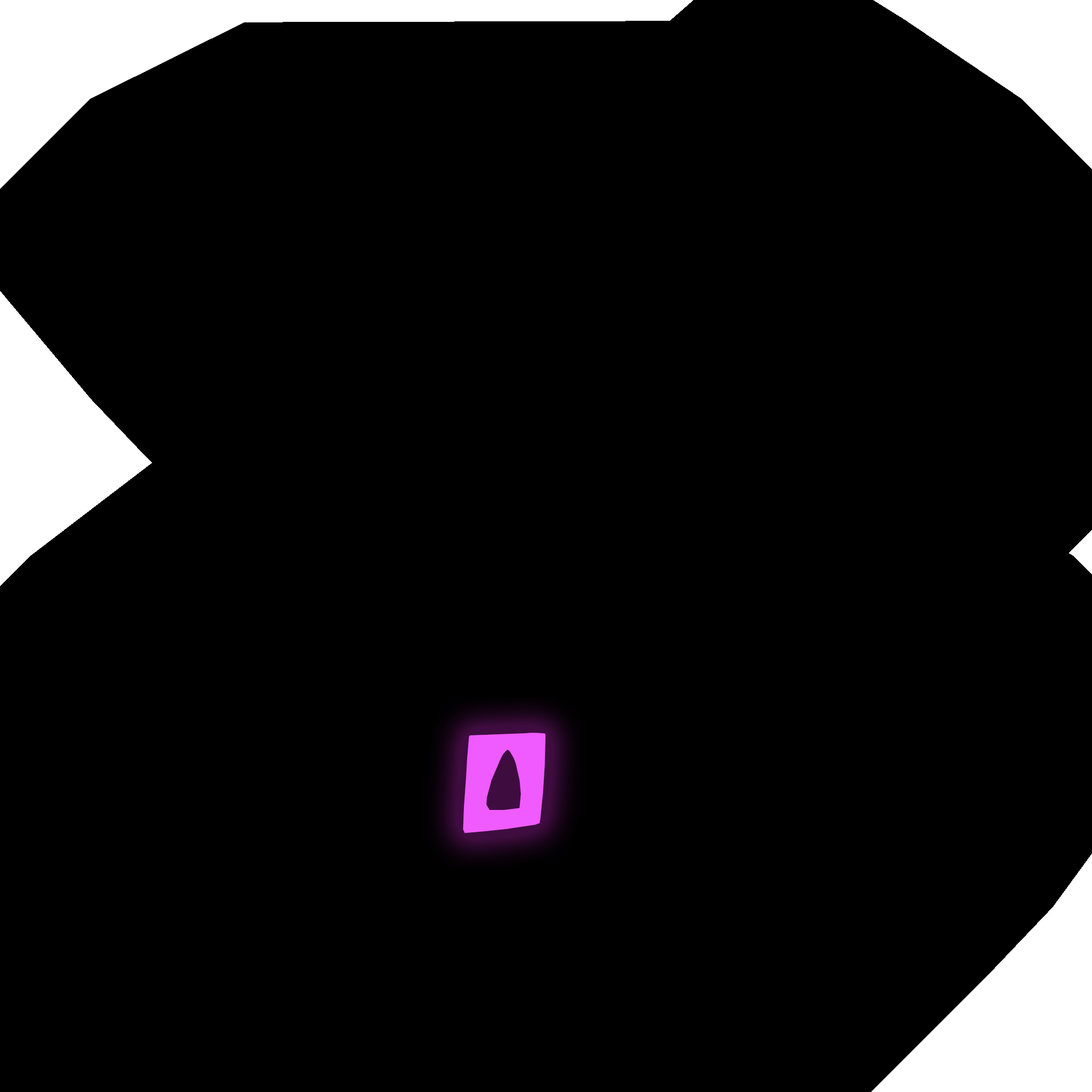
<style>
.page{position:relative;width:1092px;height:1092px;background:#000000}
.page>*{position:absolute;margin:0}
.t1{font:160px "Tarzan";color:#ef5bff}
</style>
<div class="page">
<p class="t1" style="left:463px;top:733px;width:83px;height:100px">0</p>
</div>
